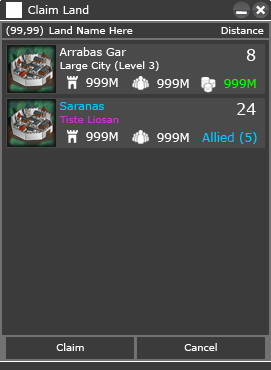
<style>
.page{position:relative;width:271px;height:370px;background:#3b3b3b}
.page>*{position:absolute;margin:0}
.t1{font:11px "Verdana";color:#ffffff}
.t2{font:10px "Verdana";color:#ffffff}
.t3{font:16px "Verdana";color:#ffffff}
.t4{font:12px "Verdana";color:#ffffff}
.t5{font:12px "Verdana";color:#00ff00}
.t6{font:11px "Verdana";color:#00ccff}
.t7{font:10px "Verdana";color:#cc33cc}
.t8{font:12px "Verdana";color:#00ccff}
</style>
<div class="page">
<p class="t1" style="left:28px;top:5px;width:61px;height:9px">Claim Land</p>
<p class="t2" style="left:6px;top:26px;width:37px;height:10px">(99,99)</p>
<p class="t2" style="left:49px;top:26px;width:84px;height:8px">Land Name Here</p>
<p class="t2" style="left:221px;top:27px;width:43px;height:7px">Distance</p>
<p class="t1" style="left:59px;top:47px;width:68px;height:9px">Arrabas Gar</p>
<p class="t3" style="left:246px;top:49px;width:10px;height:12px">8</p>
<p class="t2" style="left:60px;top:61px;width:99px;height:10px">Large City (Level 3)</p>
<p class="t4" style="left:86px;top:78px;width:32px;height:9px">999M</p>
<p class="t4" style="left:157px;top:79px;width:32px;height:9px">999M</p>
<p class="t5" style="left:224px;top:79px;width:32px;height:9px">999M</p>
<p class="t6" style="left:60px;top:102px;width:44px;height:8px">Saranas</p>
<p class="t3" style="left:237px;top:103px;width:19px;height:12px">24</p>
<p class="t7" style="left:59px;top:116px;width:60px;height:7px">Tiste Liosan</p>
<p class="t4" style="left:86px;top:132px;width:32px;height:9px">999M</p>
<p class="t4" style="left:157px;top:133px;width:32px;height:9px">999M</p>
<p class="t8" style="left:202px;top:132px;width:55px;height:12px">Allied (5)</p>
<p class="t2" style="left:56px;top:343px;width:28px;height:8px">Claim</p>
<p class="t2" style="left:184px;top:343px;width:33px;height:8px">Cancel</p>
</div>
